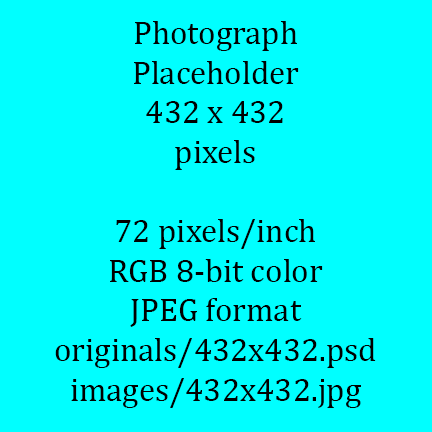
<style>
.page{position:relative;width:432px;height:432px;background:#00ffff}
.page>*{position:absolute;margin:0}
.t1{font:33px "Cambria";color:#000000}
</style>
<div class="page">
<p class="t1" style="left:55px;top:21px;width:321px;height:387px;text-align:center">Photograph<br>Placeholder<br>432 x 432<br>pixels<br><br>72 pixels/inch<br>RGB 8-bit color<br>JPEG format<br>originals/432x432.psd<br>images/432x432.jpg</p>
</div>
